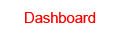
<style>
.page{position:relative;width:127px;height:40px;background:#ffffff}
.page>*{position:absolute;margin:0}
.t1{font:14.7px "ArialMT";color:#ff0000}
</style>
<div class="page">
<p class="t1" style="left:25px;top:12px;width:71px;height:11px">Dashboard</p>
</div>
